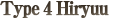
<style>
.page{position:relative;width:115px;height:18px;background:#ffffff}
.page>*{position:absolute;margin:0}
.t1{font:19px "RyuminPro-ExBold";letter-spacing:-0.08em;color:#4a3f32;font-weight:bold;scale:0.9 1}
</style>
<div class="page">
<p class="t1" style="left:0px;top:1px;width:109px;height:18px">Type 4 Hiryuu</p>
</div>
